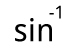
<style>
.page{position:relative;width:70px;height:55px;background:#ffffff}
.page>*{position:absolute;margin:0}
.t1{font:18px "DroidSans";color:#000000}
.t2{font:31.8px "DroidSans";color:#000000}
</style>
<div class="page">
<p class="t1" style="left:49px;top:5px;width:12px;height:14px">-1</p>
<p class="t2" style="left:15px;top:18px;width:37px;height:24px">sin</p>
</div>
